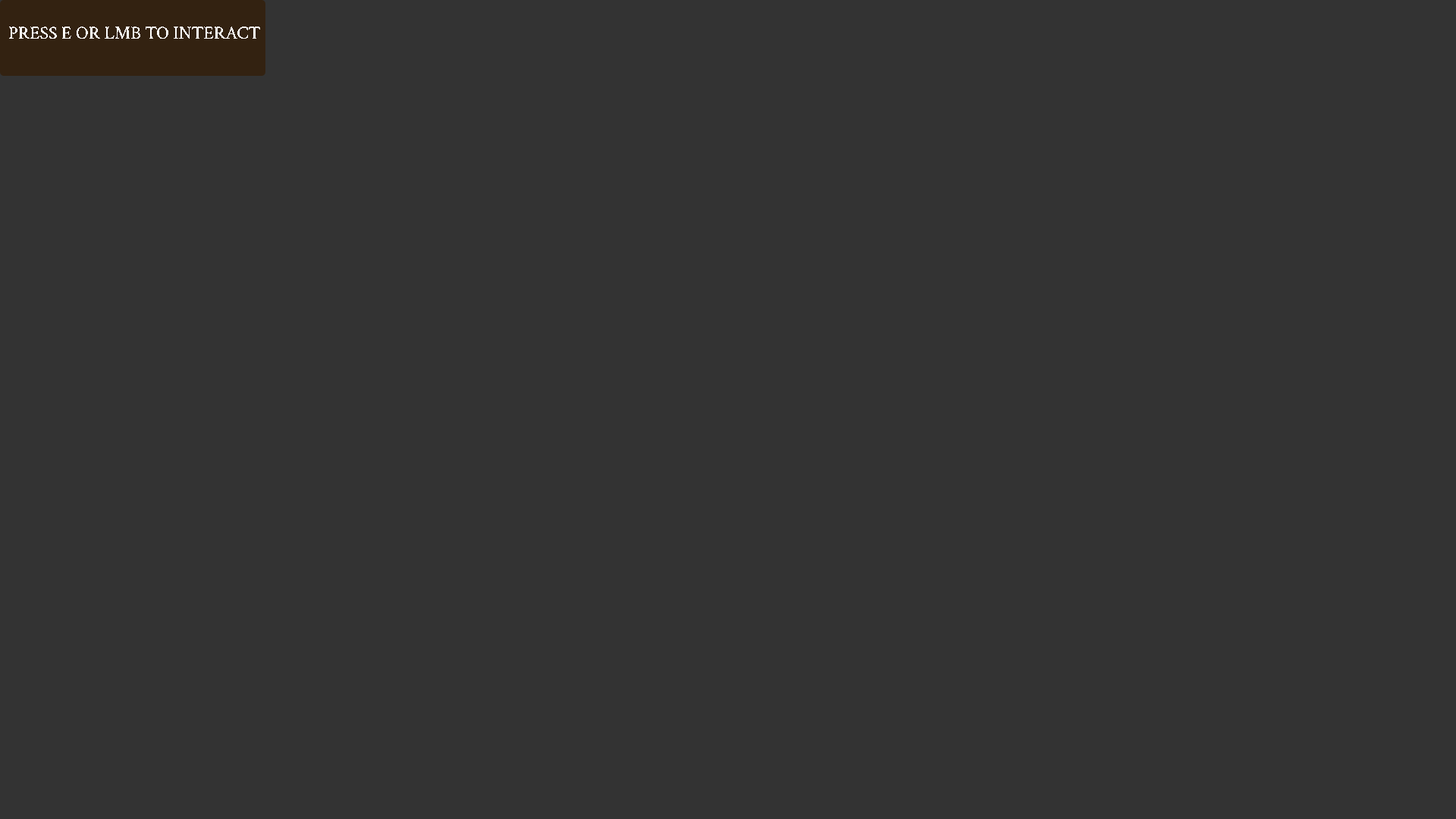
<style>
.page{position:relative;width:1456px;height:819px;background:#333333}
.page>*{position:absolute;margin:0}
.t1{font:18.2px "CrimsonText-Regular";color:#ffffff}
</style>
<div class="page">
<p class="t1" style="left:9px;top:27px;width:251px;height:12px">PRESS E OR LMB TO INTERACT</p>
</div>
